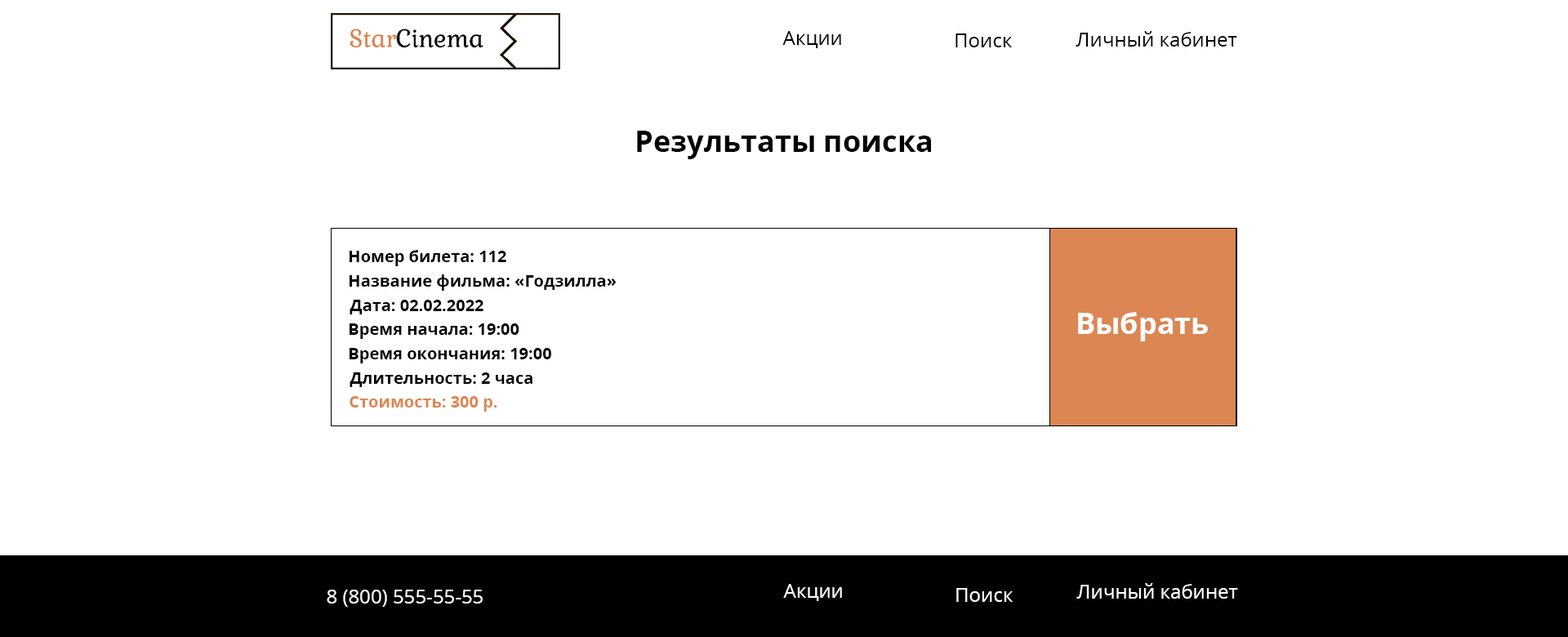
<style>
.page{position:relative;width:1568px;height:637px;background:#ffffff}
.page>*{position:absolute;margin:0}
.t1{font:19.6px "OpenSans-Regular";color:#000000}
.t2{font:29.4px "OpenSans-Bold";color:#000000}
.t3{font:16.3px "OpenSans-Bold";color:#000000}
.t4{font:29.4px "OpenSans-Bold";color:#ffffff}
.t5{font:16.3px "OpenSans-Bold";color:#dc8653}
.t6{font:19.6px "OpenSans-Regular";color:#ffffff}
</style>
<div class="page">
<p class="t1" style="left:782px;top:31px;width:59px;height:17px">Акции</p>
<p class="t1" style="left:956px;top:33px;width:56px;height:14px">Поиск</p>
<p class="t1" style="left:1076px;top:31px;width:161px;height:16px">Личный кабинет</p>
<p class="t2" style="left:637px;top:131px;width:294px;height:28px">Результаты поиска</p>
<p class="t3" style="left:350px;top:250px;width:156px;height:16px">Номер билета: 112</p>
<p class="t3" style="left:350px;top:274px;width:267px;height:17px">Название фильма: «Годзилла»</p>
<p class="t3" style="left:350px;top:300px;width:133px;height:14px">Дата: 02.02.2022</p>
<p class="t4" style="left:1078px;top:312px;width:130px;height:29px">Выбрать</p>
<p class="t3" style="left:350px;top:323px;width:169px;height:16px">Время начала: 19:00</p>
<p class="t3" style="left:350px;top:348px;width:201px;height:15px">Время окончания: 19:00</p>
<p class="t3" style="left:350px;top:372px;width:182px;height:15px">Длительность: 2 часа</p>
<p class="t5" style="left:350px;top:396px;width:147px;height:16px">Стоимость: 300 р.</p>
<p class="t6" style="left:327px;top:590px;width:156px;height:17px">8 (800) 555-55-55</p>
<p class="t6" style="left:783px;top:584px;width:59px;height:17px">Акции</p>
<p class="t6" style="left:956px;top:588px;width:57px;height:14px">Поиск</p>
<p class="t6" style="left:1076px;top:583px;width:162px;height:16px">Личный кабинет</p>
</div>
